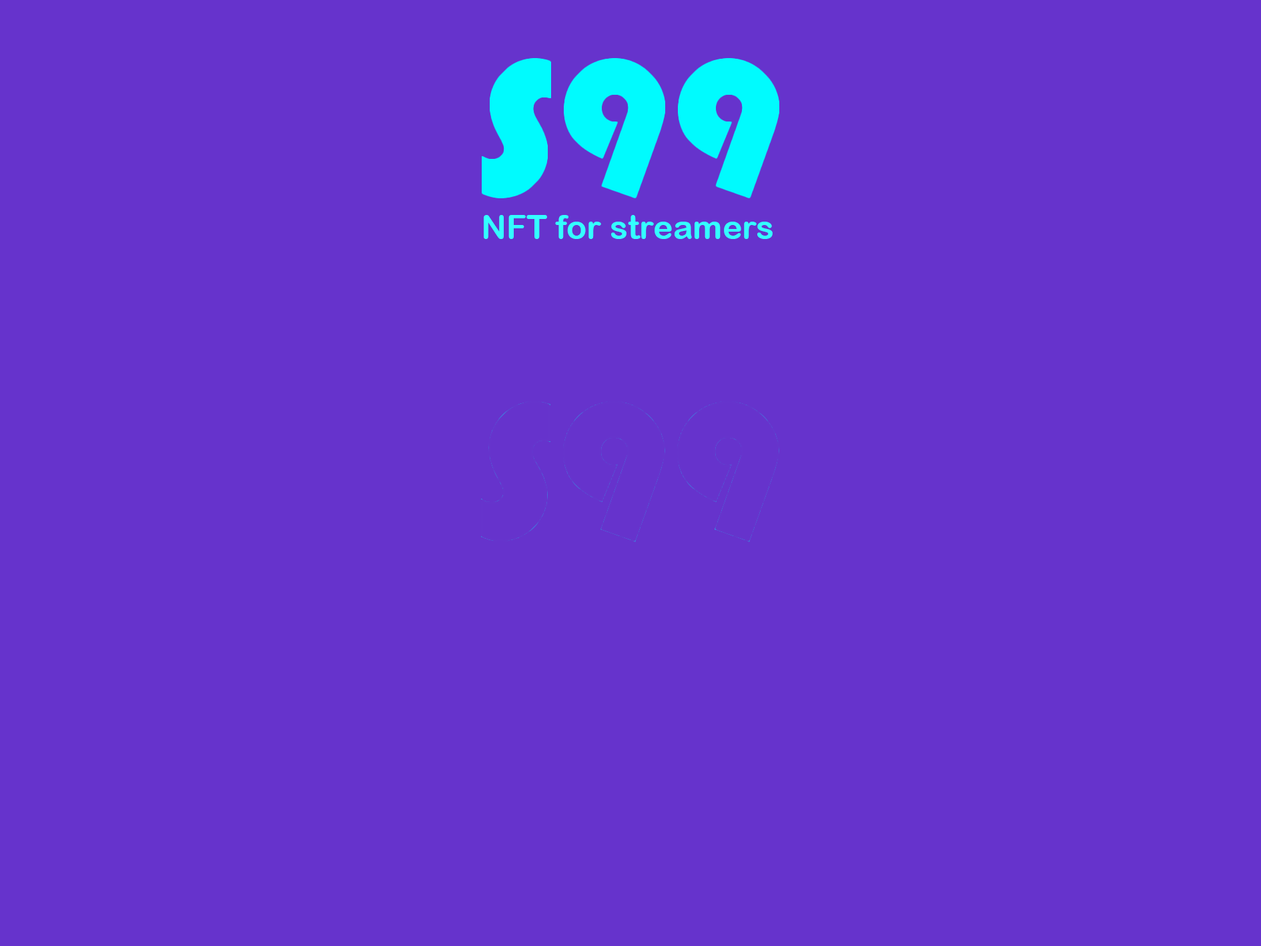
<style>
.page{position:relative;width:1261px;height:946px;background:#6633cc}
.page>*{position:absolute;margin:0}
.t1{font:33.4px "ArialRoundedMTBold";color:#33ffff}
</style>
<div class="page">
<p class="t1" style="left:484px;top:215px;width:289px;height:24px">NFT for streamers</p>
</div>
